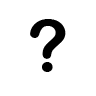
<style>
.page{position:relative;width:96px;height:96px;background:#ffffff}
.page>*{position:absolute;margin:0}
.t1{font:72px "ArialRoundedMTBold";color:#000000}
</style>
<div class="page">
<p class="t1" style="left:30px;top:19px;width:36px;height:53px">?</p>
</div>
